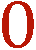
<style>
.page{position:relative;width:36px;height:50px;background:#ffffff}
.page>*{position:absolute;margin:0}
.t1{font:68.3px "CambriaMath";color:#b91706;scale:1.11 1}
</style>
<div class="page">
<p class="t1" style="left:2px;top:1px;width:32px;height:47px">0</p>
</div>
